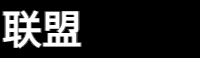
<style>
.page{position:relative;width:200px;height:58px;background:#000000}
.page>*{position:absolute;margin:0}
.t1{font:40px "WebPSD-18463539-0-Regular";color:#ffffff;font-weight:bold}
</style>
<div class="page">
<p class="t1" style="left:0px;top:0px;width:200px;height:58px">联盟</p>
</div>
